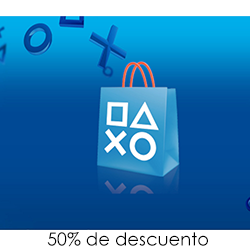
<style>
.page{position:relative;width:250px;height:250px}
.page>*{position:absolute;margin:0}
.t1{font:18.1px "CenturyGothic";letter-spacing:0.002em;color:#000000}
</style>
<div class="page">
<p class="t1" style="left:47px;top:232px;width:161px;height:15px">50% de descuento</p>
</div>
